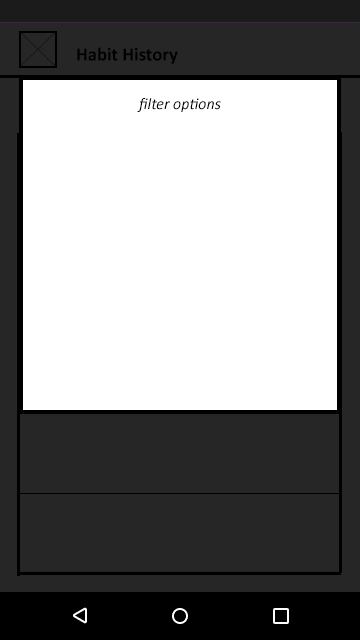
<style>
.page{position:relative;width:360px;height:640px;background:#ffffff}
.page>*{position:absolute;margin:0}
.t1{font:18.9px "Calibri-Bold";color:#000000}
.t2{font:16px "Calibri-Italic";color:#000000}
</style>
<div class="page">
<p class="t1" style="left:77px;top:47px;width:101px;height:17px">Habit History</p>
<p class="t2" style="left:137px;top:98px;width:84px;height:14px">filter options</p>
</div>
